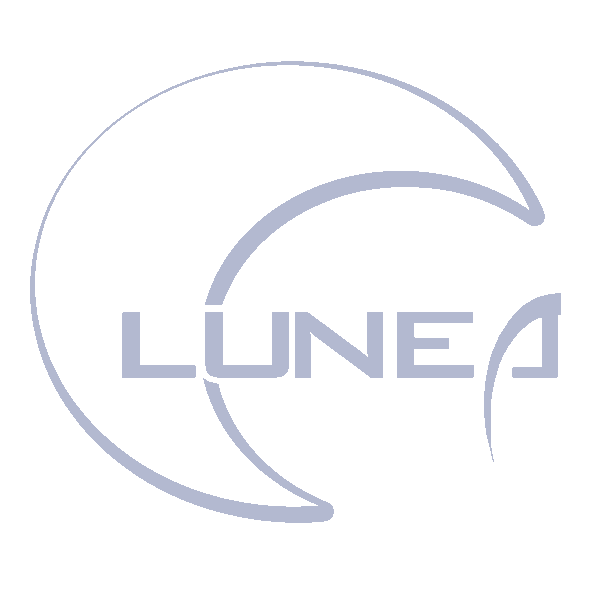
<style>
.page{position:relative;width:600px;height:600px;background:#ffffff}
.page>*{position:absolute;margin:0}
.t1{font:216px "Backslash";letter-spacing:-0.05em;color:#b3b9d0;scale:0.67 1}
</style>
<div class="page">
<p class="t1" style="left:122px;top:293px;width:439px;height:170px">Lunea</p>
</div>
